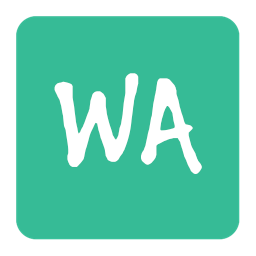
<style>
.page{position:relative;width:256px;height:256px;background:#36bb96}
.page>*{position:absolute;margin:0}
.t1{font:132px "BuxtonSketch";color:#ffffff}
</style>
<div class="page">
<p class="t1" style="left:54px;top:73px;width:148px;height:101px">WA</p>
</div>
